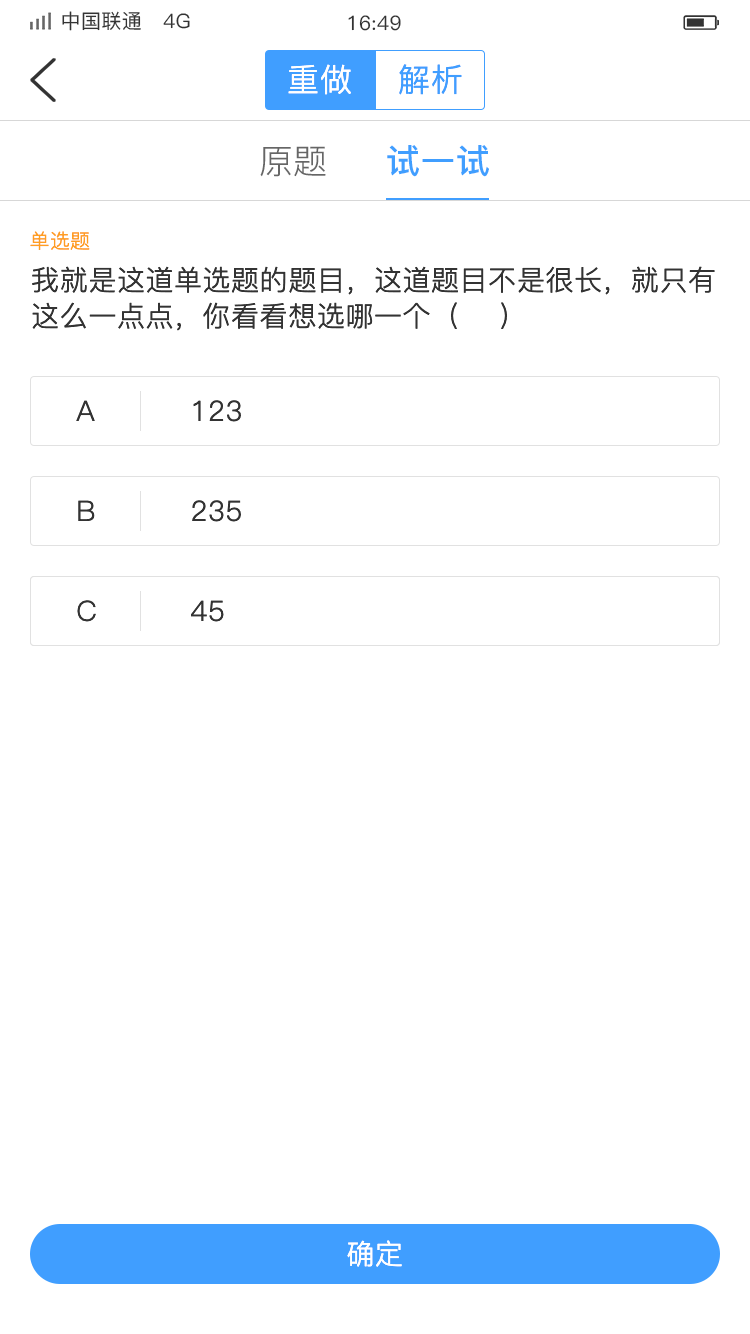
<style>
.page{position:relative;width:750px;height:1334px;background:#ffffff}
.page>*{position:absolute;margin:0}
.t1{font:20px "PingFang-SC-Medium";letter-spacing:0.02em;color:#333333}
.t2{font:32px "PingFang-SC-Regular";letter-spacing:0.02em;color:#ffffff}
.t3{font:32px "PingFang-SC-Regular";letter-spacing:0.02em;color:#409eff}
.t4{font:34px "PingFang-SC-Regular";color:#666666}
.t5{font:34px "PingFang-SC-Bold";letter-spacing:0.02em;color:#409eff}
.t6{font:20px "PingFang-SC-Regular";letter-spacing:0.02em;color:#ff9e21}
.t7{font:28px/36px "PingFang-SC-Regular";letter-spacing:0.02em;color:#333333}
.t8{font:28px "PingFang-SC-Regular";letter-spacing:0.02em;color:#333333}
.t9{font:28px "PingFang-SC-Regular";letter-spacing:0.02em;color:#ffffff}
</style>
<div class="page">
<p class="t1" style="left:62px;top:11px;width:128px;height:20px">中国联通   4G</p>
<p class="t1" style="left:348px;top:15px;width:53px;height:16px">16:49</p>
<p class="t2" style="left:288px;top:64px;width:63px;height:31px">重做</p>
<p class="t3" style="left:399px;top:64px;width:63px;height:31px">解析</p>
<p class="t4" style="left:260px;top:146px;width:66px;height:31px">原题</p>
<p class="t5" style="left:387px;top:145px;width:102px;height:32px">试一试</p>
<p class="t6" style="left:30px;top:231px;width:60px;height:19px">单选题</p>
<p class="t7" style="left:32px;top:266px;width:683px;height:65px">我就是这道单选题的题目，这道题目不是很长，就只有这么一点点，你看看想选哪一个（    ）</p>
<p class="t8" style="left:76px;top:400px;width:19px;height:21px">A</p>
<p class="t8" style="left:193px;top:400px;width:48px;height:22px">123</p>
<p class="t8" style="left:78px;top:500px;width:17px;height:21px">B</p>
<p class="t8" style="left:192px;top:500px;width:49px;height:22px">235</p>
<p class="t8" style="left:77px;top:600px;width:19px;height:22px">C</p>
<p class="t8" style="left:77px;top:600px;width:19px;height:22px">C</p>
<p class="t8" style="left:191px;top:600px;width:33px;height:22px">45</p>
<p class="t8" style="left:191px;top:600px;width:33px;height:22px">45</p>
<p class="t9" style="left:347px;top:1240px;width:55px;height:27px">确定</p>
</div>
